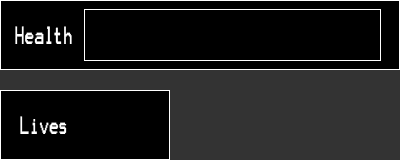
<style>
.page{position:relative;width:400px;height:160px;background:#000000}
.page>*{position:absolute;margin:0}
.t1{font:20px "Terminal";color:#ffffff;scale:0.65 1}
</style>
<div class="page">
<p class="t1" style="left:15px;top:26px;width:57px;height:18px">Health</p>
<p class="t1" style="left:20px;top:116px;width:47px;height:18px">Lives</p>
</div>
